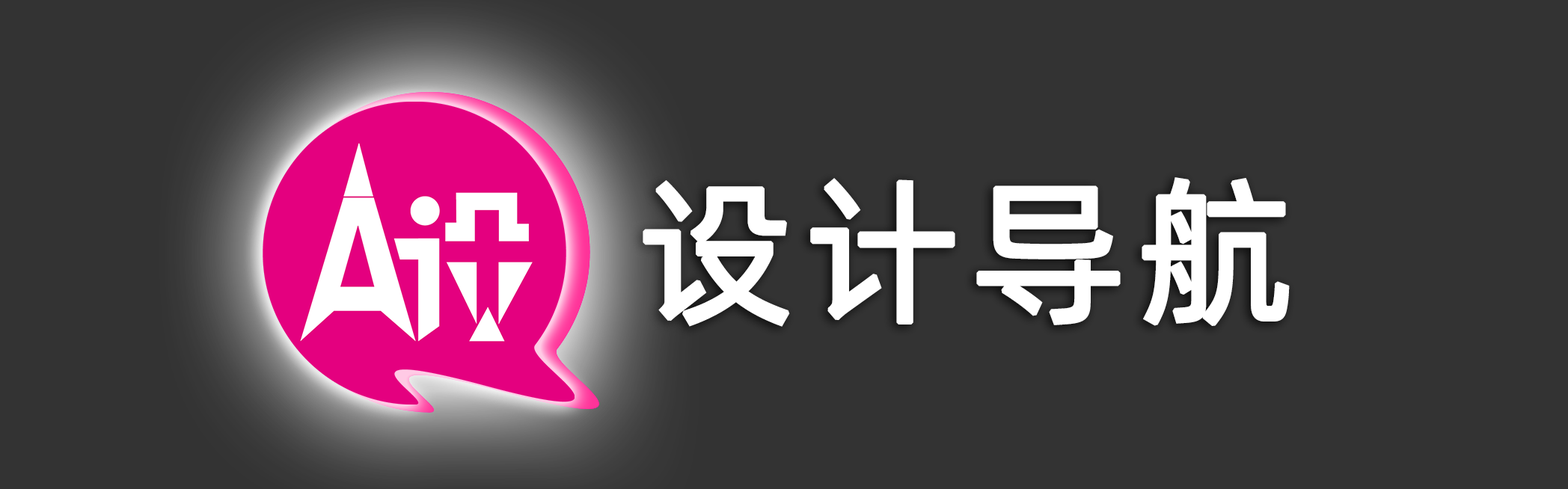
<style>
.page{position:relative;width:1568px;height:489px;background:#333333}
.page>*{position:absolute;margin:0}
.t1{font:157.8px "AlibabaPuHuiTiR";letter-spacing:0.045em;color:#ffffff;font-weight:bold}
</style>
<div class="page">
<p class="t1" style="left:643px;top:177px;width:647px;height:150px">设计导航</p>
</div>
